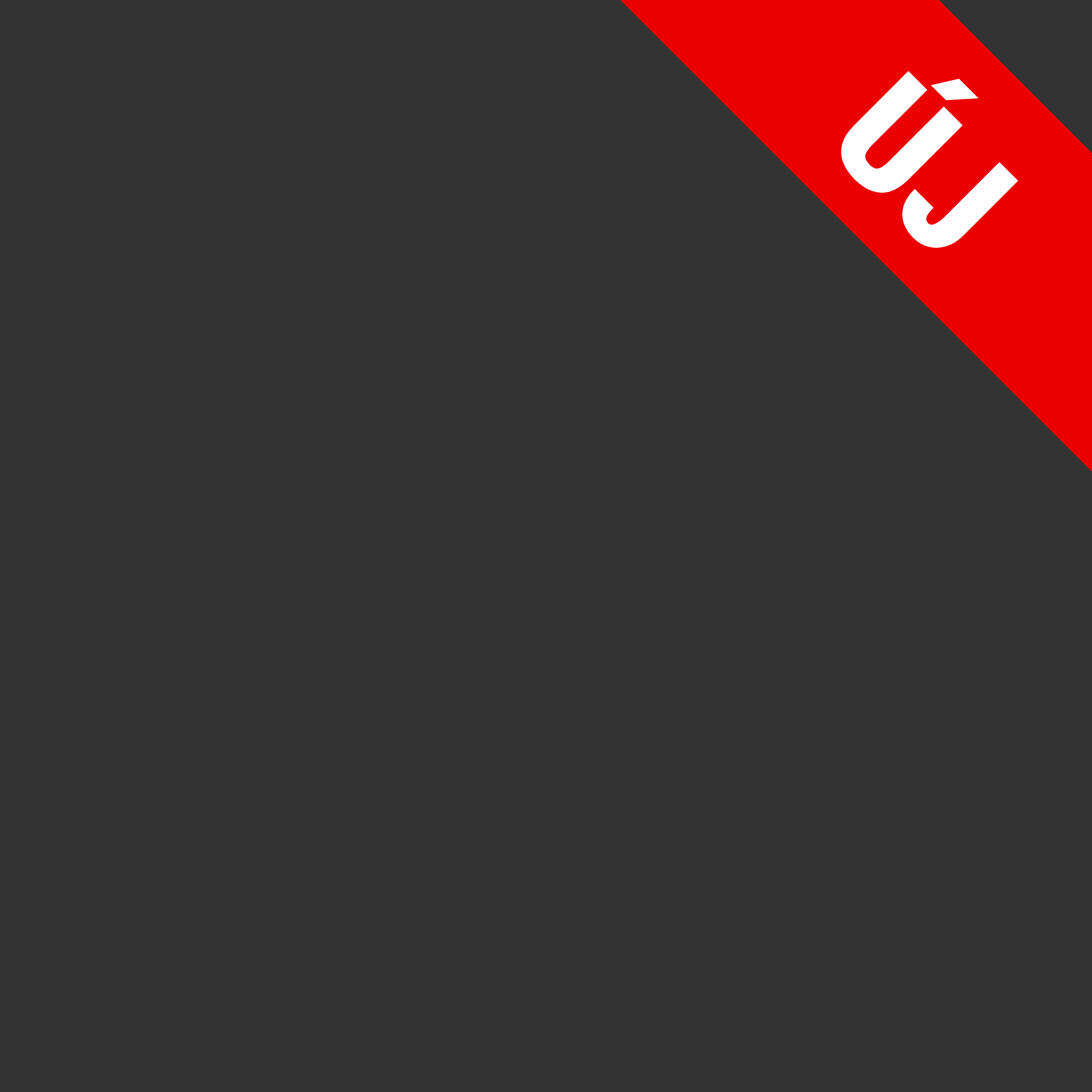
<style>
.page{position:relative;width:1092px;height:1092px;background:#333333}
.page>*{position:absolute;margin:0}
.t1{font:159.1px "Roboto-CondensedBlack";color:#ffffff}
</style>
<div class="page">
<p class="t1" style="left:841px;top:71px;width:177px;height:177px;rotate:45deg">ÚJ</p>
</div>
